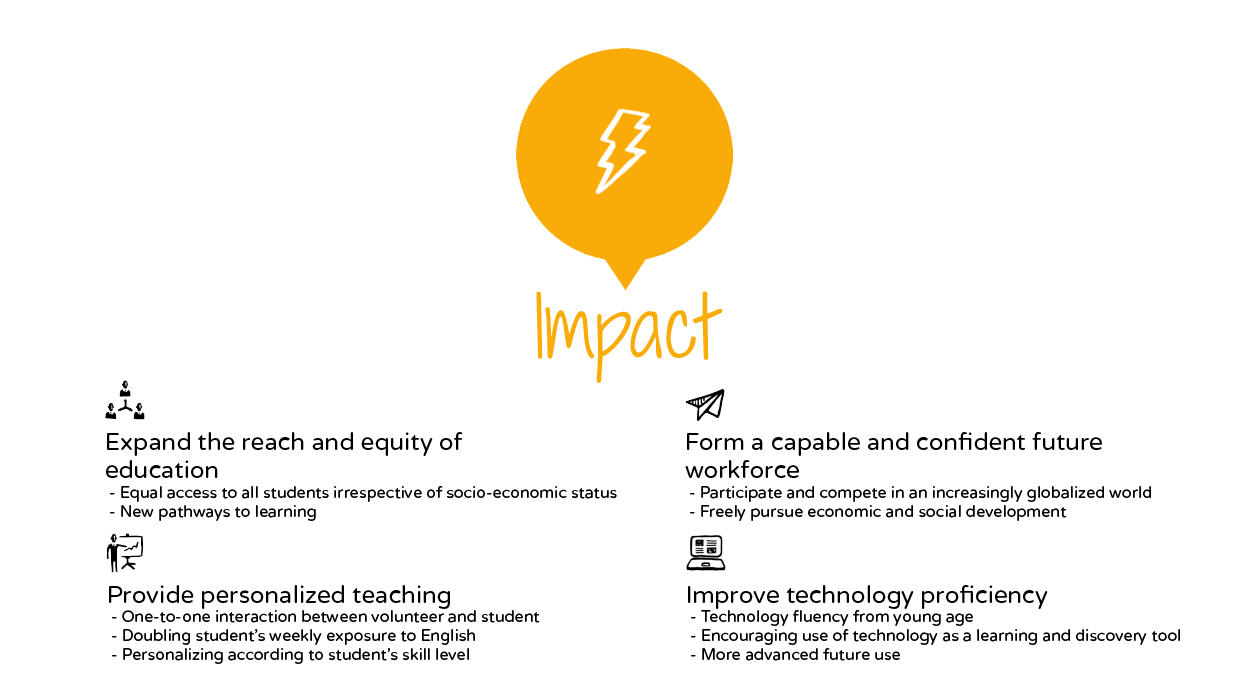
<style>
.page{position:relative;width:1250px;height:700px;background:#ffffff}
.page>*{position:absolute;margin:0}
.t1{font:80px "ShadowsIntoLight";color:#f9ac08}
.t2{font:16px "VarelaRound";color:#000000}
.t3{font:24px "VarelaRound";color:#000000}
</style>
<div class="page">
<p class="t1" style="left:536px;top:291px;width:187px;height:92px">Impact</p>
<p class="t2" style="left:106px;top:432px;width:511px;height:89px"><span class="t3">Expand the reach and equity of <br>education<br></span> - Equal access to all students irrespective of socio-economic status<br> - New pathways to learning</p>
<p class="t2" style="left:685px;top:432px;width:466px;height:89px"><span class="t3">Form a capable and confident future <br>workforce<br></span> - Participate and compete in an increasingly globalized world<br> - Freely pursue economic and social development</p>
<p class="t2" style="left:109px;top:585px;width:431px;height:79px"><span class="t3">Provide personalized teaching<br></span> - One-to-one interaction between volunteer and student<br> - Doubling student’s weekly exposure to English<br> - Personalizing according to student’s skill level</p>
<p class="t2" style="left:688px;top:585px;width:492px;height:76px"><span class="t3">Improve technology proficiency<br></span> - Technology fluency from young age<br> - Encouraging use of technology as a learning and discovery tool<br> - More advanced future use</p>
</div>
